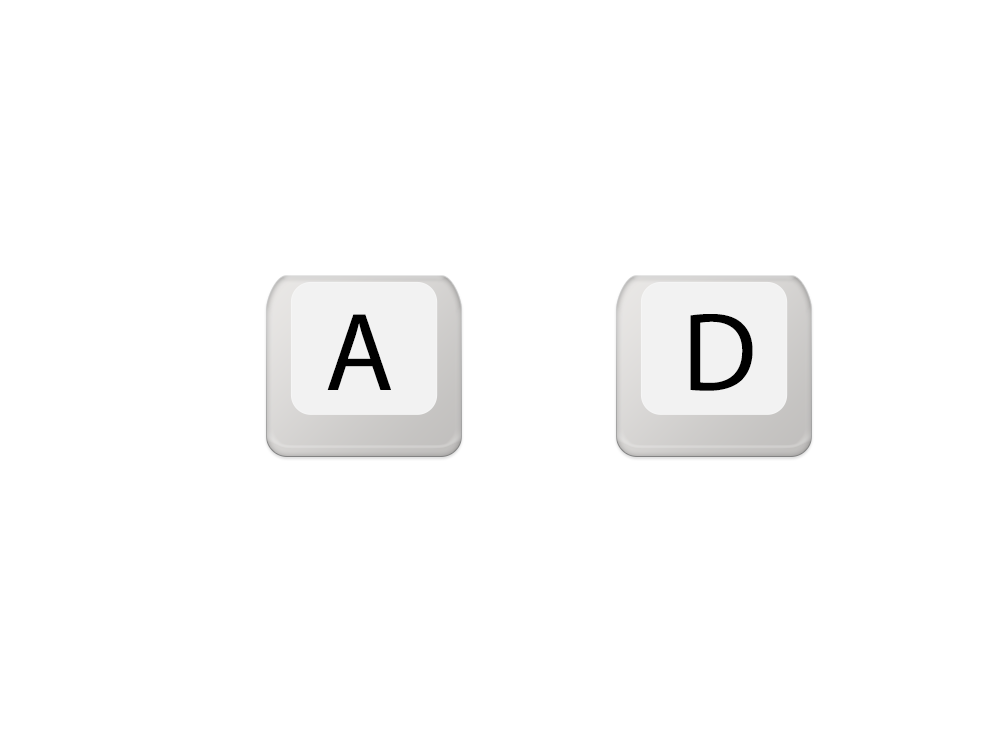
<style>
.page{position:relative;width:995px;height:732px;background:#ffffff}
.page>*{position:absolute;margin:0}
.t1{font:112px "MyriadPro-Regular";color:#000000}
</style>
<div class="page">
<p class="t1" style="left:327px;top:314px;width:64px;height:76px">A</p>
<p class="t1" style="left:690px;top:314px;width:63px;height:77px">D</p>
</div>
